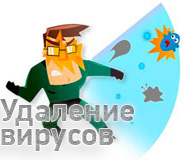
<style>
.page{position:relative;width:183px;height:160px;background:#ffffff}
.page>*{position:absolute;margin:0}
.t1{font:32.2px/24px "PFDinDisplayPro-Bold";color:#979797}
</style>
<div class="page">
<p class="t1" style="left:0px;top:99px;width:134px;height:52px">Удаление <br>вирусов</p>
</div>
